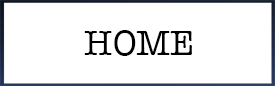
<style>
.page{position:relative;width:275px;height:86px;background:#ffffff}
.page>*{position:absolute;margin:0}
.t1{font:36px "AmericanTypewriter";color:#000000}
</style>
<div class="page">
<p class="t1" style="left:84px;top:30px;width:108px;height:26px">HOME</p>
</div>
